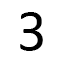
<style>
.page{position:relative;width:64px;height:64px;background:#ffffff}
.page>*{position:absolute;margin:0}
.t1{font:58.3px "Calibri";color:#000000}
</style>
<div class="page">
<p class="t1" style="left:20px;top:12px;width:23px;height:39px">З</p>
</div>
